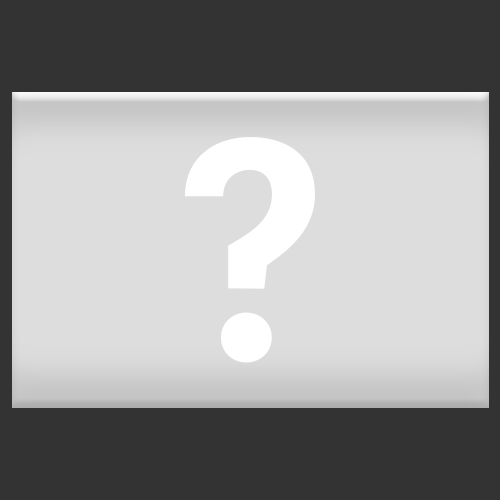
<style>
.page{position:relative;width:500px;height:500px;background:#333333}
.page>*{position:absolute;margin:0}
.t1{font:300px "CosimaTrial-Bold";letter-spacing:0.025em;color:#ffffff;text-transform:uppercase}
</style>
<div class="page">
<p class="t1" style="left:184px;top:137px;width:131px;height:226px">?</p>
</div>
